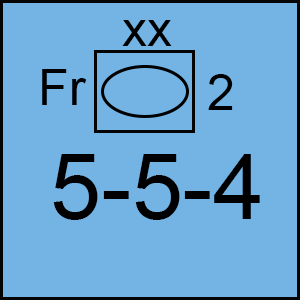
<style>
.page{position:relative;width:300px;height:300px;background:#74b4e4}
.page>*{position:absolute;margin:0}
.t1{font:50px "ArialMT";color:#000000}
.t2{font:91.7px "ArialMT";color:#000000}
</style>
<div class="page">
<p class="t1" style="left:122px;top:20px;width:50px;height:26px">xx</p>
<p class="t1" style="left:42px;top:69px;width:44px;height:36px">Fr</p>
<p class="t1" style="left:208px;top:74px;width:25px;height:36px">2</p>
<p class="t2" style="left:53px;top:154px;width:207px;height:66px">5-5-4</p>
</div>
